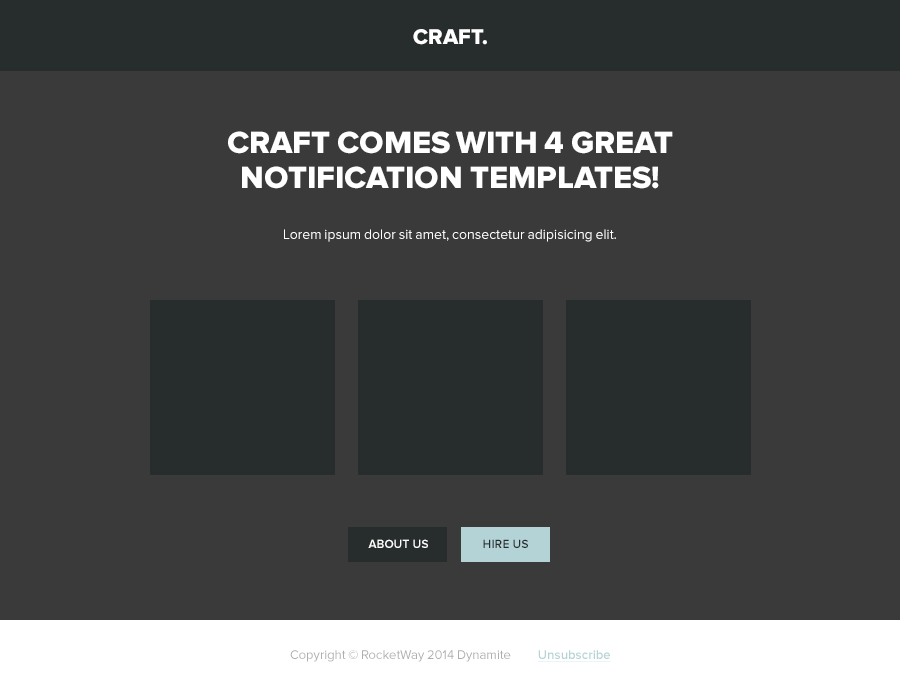
<style>
.page{position:relative;width:900px;height:692px;background:#3a3a3a}
.page>*{position:absolute;margin:0}
.t1{font:22px "ProximaNova-Extrabld";color:#ffffff;text-transform:uppercase}
.t2{font:32px/35px "ProximaNova-Extrabld";color:#ffffff;text-transform:uppercase}
.t3{font:14px "ProximaNova-Regular";color:#ffffff}
.t4{font:12px "ProximaNova-Semibold";color:#ffffff;text-transform:uppercase}
.t5{font:12px "ProximaNova-Semibold";color:#272c2d;text-transform:uppercase}
.t6{font:13px "ProximaNova-Regular";color:#adaeb0}
.t7{font:13px "ProximaNova-Semibold";color:#b3d3d6;text-decoration:underline}
</style>
<div class="page">
<p class="t1" style="left:413px;top:29px;width:74px;height:16px">Craft.</p>
<p class="t2" style="left:228px;top:131px;width:445px;height:58px;text-align:center">Craft comes with 4 great <br>notification templates!</p>
<p class="t3" style="left:284px;top:229px;width:332px;height:13px">Lorem ipsum dolor sit amet, consectetur adipisicing elit.</p>
<p class="t4" style="left:368px;top:539px;width:60px;height:9px">about us</p>
<p class="t5" style="left:483px;top:539px;width:45px;height:9px">hire us</p>
<p class="t6" style="left:290px;top:650px;width:321px;height:12px">Copyright © RocketWay 2014 Dynamite          <span class="t7">Unsubscribe</span></p>
</div>
